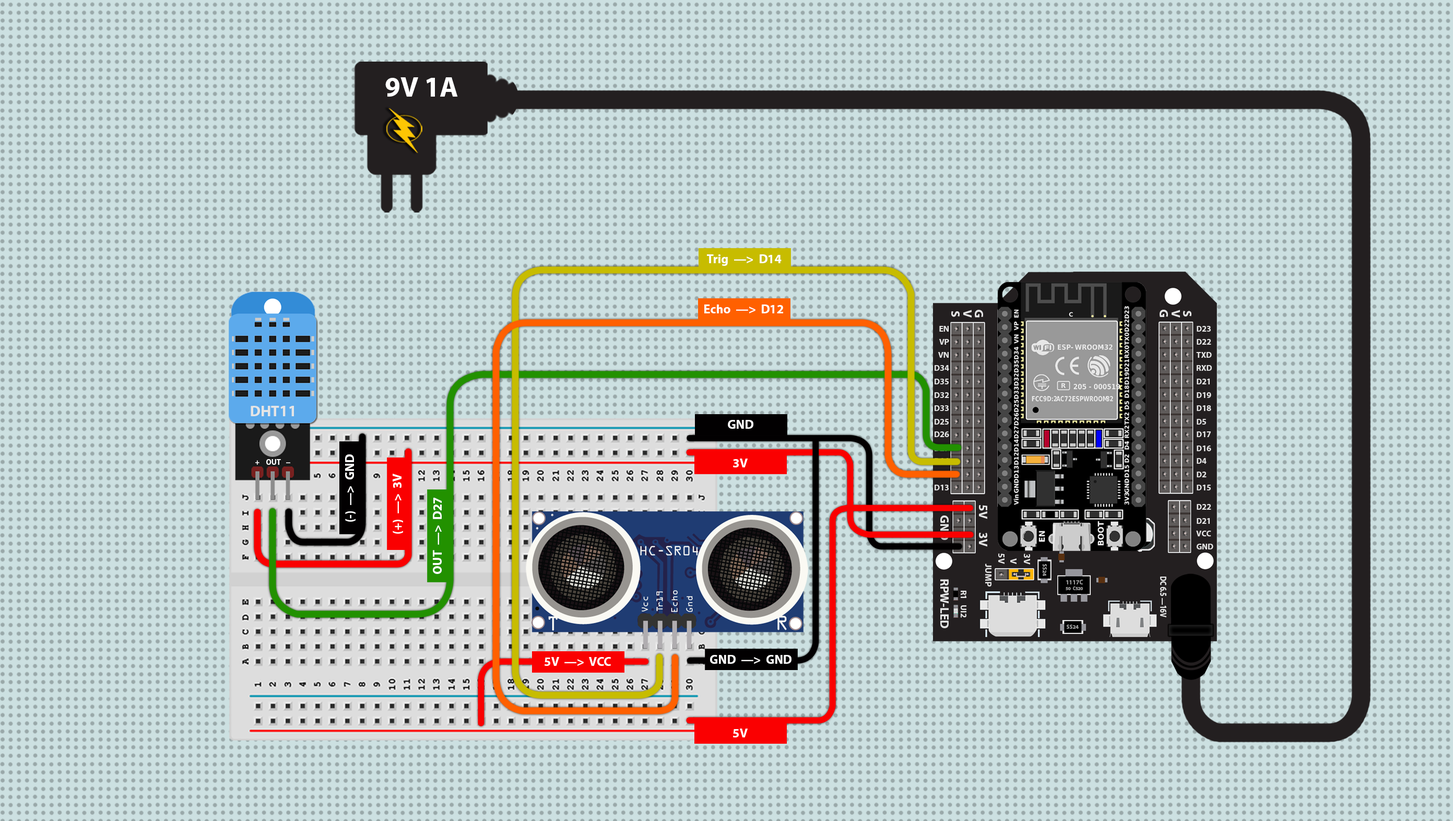
<style>
.page{position:relative;width:1453px;height:821px;background:#cce0e1}
.page>*{position:absolute;margin:0}
.t1{font:28.2px "MyriadPro-Bold";color:#ffffff}
.t2{font:21.6px "MyriadPro-Bold";color:#ffffff}
.t3{font:21.2px "MyriadPro-Bold";color:#e5e5e5}
.t4{font:14.4px "MyriadPro-Bold";color:#e5e5e5}
.t5{font:26.6px "MyriadPro-Bold";color:#e5e5e5}
.t6{font:13.6px "MyriadPro-Bold";color:#ffffff;scale:0.95 1}
.t7{font:13.6px "MyriadPro-Bold";color:#ffffff;scale:2.01 1}
.t8{font:15.6px "MyriadPro-Bold";color:#e5e5e5}
.t9{font:9.6px "MyriadPro-Bold";color:#9f9f9f}
.t10{font:8.3px/6.6px "MyriadPro-Bold";color:#9f9f9f;scale:0.96 1}
.t11{font:11px/6.6px "MyriadPro-Bold";color:#9f9f9f;scale:0.96 1}
.t12{font:15.6px "MyriadPro-Bold";color:#e5e5e5;scale:0.78 1}
</style>
<div class="page">
<p class="t1" style="left:385px;top:77px;width:73px;height:20px">9V 1A</p>
<p class="t2" style="left:707px;top:254px;width:75px;height:12px">Trig  —&gt;  D14</p>
<p class="t2" style="left:704px;top:304px;width:79px;height:9px">Echo  —&gt;  D12</p>
<p class="t3" style="left:951px;top:311px;width:9px;height:6px;rotate:90deg">S</p>
<p class="t3" style="left:963px;top:310px;width:9px;height:7px;rotate:90deg">V</p>
<p class="t3" style="left:975px;top:310px;width:8px;height:7px;rotate:90deg">G</p>
<p class="t3" style="left:1160px;top:310px;width:8px;height:7px;rotate:90deg">G</p>
<p class="t3" style="left:1172px;top:310px;width:8px;height:7px;rotate:90deg">V</p>
<p class="t3" style="left:1183px;top:311px;width:8px;height:5px;rotate:90deg">S</p>
<p class="t4" style="left:939px;top:326px;width:10px;height:6px">EN</p>
<p class="t4" style="left:1197px;top:326px;width:14px;height:6px">D23</p>
<p class="t4" style="left:939px;top:339px;width:10px;height:6px">VP</p>
<p class="t4" style="left:1197px;top:339px;width:14px;height:6px">D22</p>
<p class="t4" style="left:938px;top:352px;width:11px;height:6px">VN</p>
<p class="t4" style="left:1196px;top:352px;width:16px;height:6px">TXD</p>
<p class="t4" style="left:935px;top:365px;width:14px;height:6px">D34</p>
<p class="t4" style="left:1197px;top:365px;width:15px;height:6px">RXD</p>
<p class="t4" style="left:935px;top:379px;width:14px;height:5px">D35</p>
<p class="t4" style="left:1197px;top:379px;width:13px;height:5px">D21</p>
<p class="t4" style="left:935px;top:392px;width:14px;height:6px">D32</p>
<p class="t4" style="left:1197px;top:392px;width:14px;height:6px">D19</p>
<p class="t5" style="left:251px;top:406px;width:43px;height:10px">DHT11</p>
<p class="t4" style="left:935px;top:405px;width:14px;height:6px">D33</p>
<p class="t4" style="left:1197px;top:405px;width:14px;height:6px">D18</p>
<p class="t2" style="left:728px;top:420px;width:25px;height:9px">GND</p>
<p class="t4" style="left:935px;top:419px;width:14px;height:5px">D25</p>
<p class="t4" style="left:1197px;top:419px;width:9px;height:5px">D5</p>
<p class="t4" style="left:935px;top:431px;width:14px;height:6px">D26</p>
<p class="t4" style="left:1197px;top:431px;width:14px;height:6px">D17</p>
<p class="t4" style="left:1197px;top:445px;width:14px;height:6px">D16</p>
<p class="t6" style="left:255px;top:460px;width:4px;height:5px">+</p>
<p class="t6" style="left:266px;top:459px;width:15px;height:6px">OUT</p>
<p class="t2" style="left:345px;top:454px;width:11px;height:68px;rotate:-90deg">(-)  —&gt;  GND</p>
<p class="t2" style="left:733px;top:458px;width:15px;height:9px">3V</p>
<p class="t4" style="left:1197px;top:458px;width:10px;height:6px">D4</p>
<p class="t7" style="left:286px;top:462px;width:4px;height:1px">-</p>
<p class="t2" style="left:393px;top:474px;width:10px;height:60px;rotate:-90deg">(+)  —&gt;  3V</p>
<p class="t4" style="left:1197px;top:471px;width:10px;height:6px">D2</p>
<p class="t4" style="left:935px;top:484px;width:14px;height:6px">D13</p>
<p class="t4" style="left:1197px;top:484px;width:14px;height:6px">D15</p>
<p class="t2" style="left:433px;top:498px;width:9px;height:76px;rotate:-90deg">OUT  —&gt;  D27</p>
<p class="t3" style="left:979px;top:505px;width:8px;height:14px;rotate:90deg">5V</p>
<p class="t4" style="left:1197px;top:504px;width:14px;height:6px">D22</p>
<p class="t3" style="left:940px;top:515px;width:9px;height:25px;rotate:90deg">GND</p>
<p class="t4" style="left:1197px;top:518px;width:13px;height:6px">D21</p>
<p class="t3" style="left:979px;top:533px;width:8px;height:14px;rotate:90deg">3V</p>
<p class="t4" style="left:1196px;top:530px;width:15px;height:6px">VCC</p>
<p class="t4" style="left:1197px;top:543px;width:16px;height:6px">GND</p>
<p class="t8" style="left:998px;top:553px;width:6px;height:11px;rotate:90deg">5V</p>
<p class="t8" style="left:1024px;top:553px;width:6px;height:11px;rotate:90deg">3V</p>
<p class="t8" style="left:985px;top:563px;width:6px;height:23px;rotate:90deg">JUMP</p>
<p class="t8" style="left:1010px;top:558px;width:6px;height:6px;rotate:90deg">V</p>
<p class="t9" style="left:1043px;top:564px;width:4px;height:12px;rotate:90deg">SS24</p>
<p class="t3" style="left:940px;top:579px;width:9px;height:49px;rotate:90deg">RPW-LED</p>
<p class="t10" style="left:1066px;top:580px;width:17px;height:10px;text-align:center"><span class="t11">1117C<br></span>50  C520</p>
<p class="t12" style="left:1160px;top:576px;width:6px;height:41px;rotate:90deg">DC 6.5 —16V</p>
<p class="t4" style="left:961px;top:590px;width:5px;height:8px;rotate:90deg">R1</p>
<p class="t4" style="left:961px;top:605px;width:5px;height:13px;rotate:90deg">UI2</p>
<p class="t9" style="left:1067px;top:624px;width:12px;height:5px">SS24</p>
<p class="t2" style="left:545px;top:657px;width:66px;height:9px">5V  —&gt;  VCC</p>
<p class="t2" style="left:710px;top:655px;width:81px;height:9px">GND  —&gt;  GND</p>
<p class="t2" style="left:733px;top:728px;width:15px;height:9px">5V</p>
</div>
